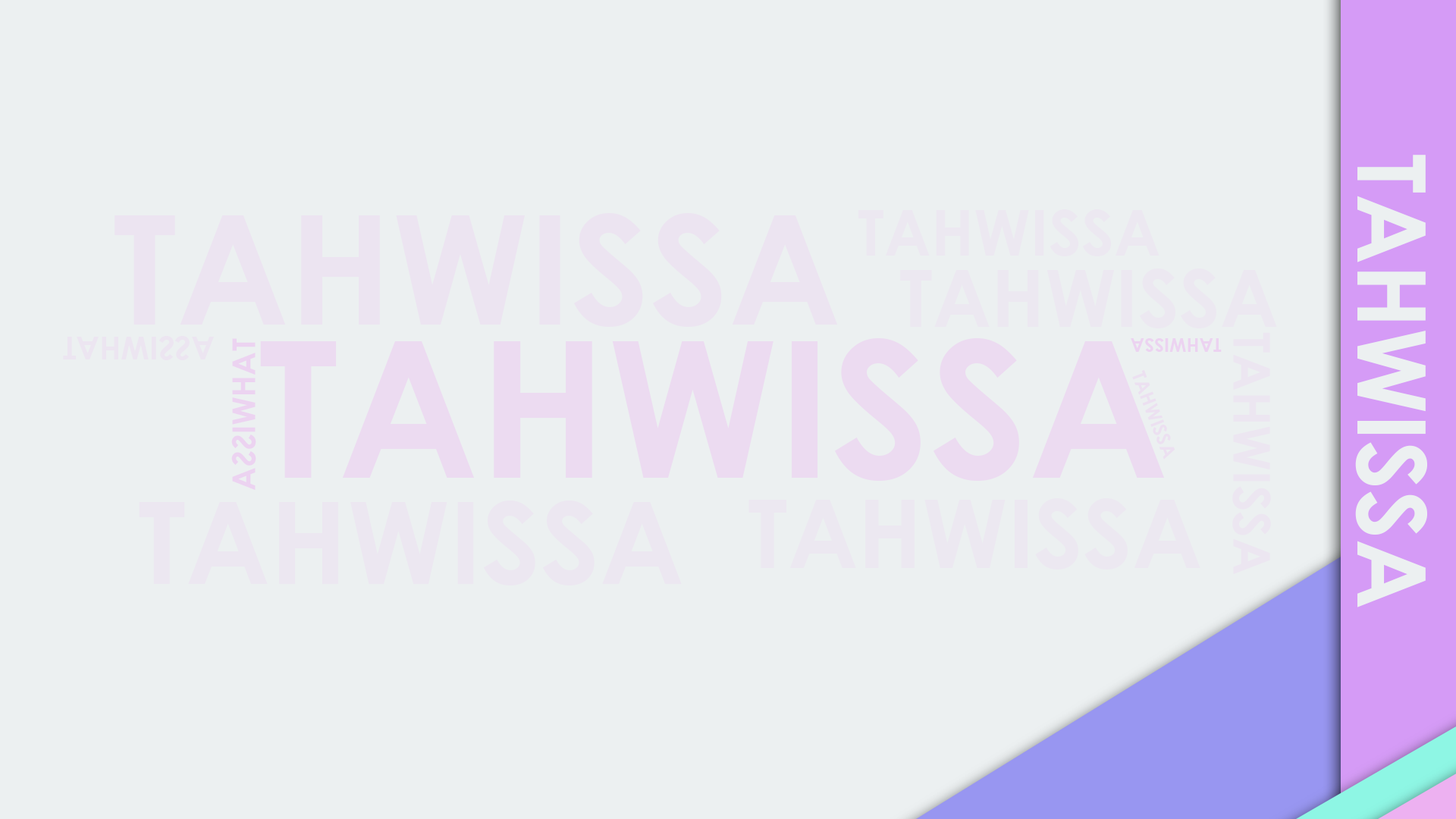
<style>
.page{position:relative;width:1456px;height:819px;background:#ecf0f1}
.page>*{position:absolute;margin:0}
.t1{font:94.8px "CenturyGothic-Bold";color:#ecf0f1}
.t2{font:63.2px "CenturyGothic-Bold";color:#ece8f1}
.t3{font:151.7px "CenturyGothic-Bold";color:#ece4f1}
.t4{font:79px "CenturyGothic-Bold";color:#ece8f1}
.t5{font:31.6px "CenturyGothic-Bold";color:#ece5f1}
.t6{font:31.6px "CenturyGothic-Bold";color:#ecd3f1}
.t7{font:189.6px "CenturyGothic-Bold";color:#ecdbf1}
.t8{font:19px "CenturyGothic-Bold";color:#ecd3f1}
.t9{font:50.6px "CenturyGothic-Bold";color:#ece6f1}
.t10{font:19px "CenturyGothic-Bold";color:#ece0f1}
.t11{font:113.7px "CenturyGothic-Bold";color:#ece7f1}
.t12{font:94.8px "CenturyGothic-Bold";color:#ece8f1}
</style>
<div class="page">
<p class="t1" style="left:1355px;top:155px;width:72px;height:452px;rotate:90deg">TAHWISSA</p>
<p class="t2" style="left:858px;top:209px;width:301px;height:47px">TAHWISSA</p>
<p class="t3" style="left:115px;top:213px;width:723px;height:114px">TAHWISSA</p>
<p class="t4" style="left:900px;top:268px;width:377px;height:60px">TAHWISSA</p>
<p class="t5" style="left:63px;top:336px;width:151px;height:24px">TAHWISSA</p>
<p class="t6" style="left:231px;top:338px;width:25px;height:152px;rotate:90deg">TAHWISSA</p>
<p class="t7" style="left:260px;top:338px;width:905px;height:143px">TAHWISSA</p>
<p class="t8" style="left:1131px;top:338px;width:91px;height:14px;rotate:-180deg">TAHWISSA</p>
<p class="t9" style="left:1232px;top:332px;width:39px;height:242px;rotate:90deg">TAHWISSA</p>
<p class="t10" style="left:1132px;top:370px;width:43px;height:90px;rotate:69deg">TAHWISSA</p>
<p class="t11" style="left:139px;top:500px;width:543px;height:85px">TAHWISSA</p>
<p class="t12" style="left:748px;top:498px;width:452px;height:72px">TAHWISSA</p>
</div>
